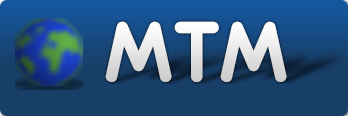
<style>
.page{position:relative;width:348px;height:116px;background:#183f68}
.page>*{position:absolute;margin:0}
.t1{font:93px "Eurofurencebold";color:#e9e9e9}
</style>
<div class="page">
<p class="t1" style="left:105px;top:21px;width:182px;height:61px">MTM</p>
</div>
